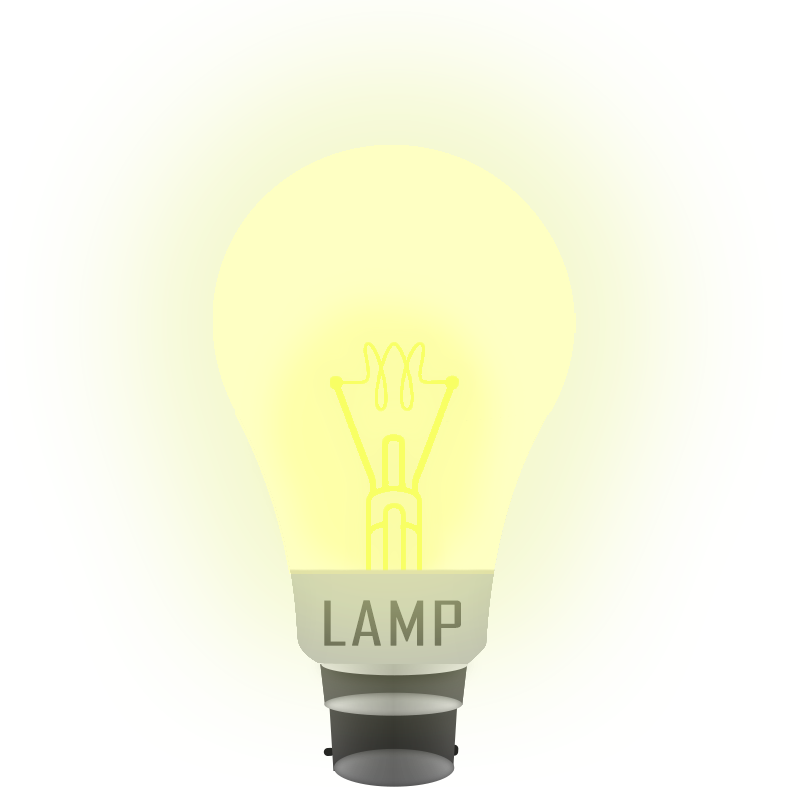
<style>
.page{position:relative;width:800px;height:800px}
.page>*{position:absolute;margin:0}
.t1{font:58.3px "AgencyFB-Reg";color:#818462;font-weight:bold;scale:1.44 1}
</style>
<div class="page">
<p class="t1" style="left:324px;top:600px;width:137px;height:46px">LAMP</p>
</div>
